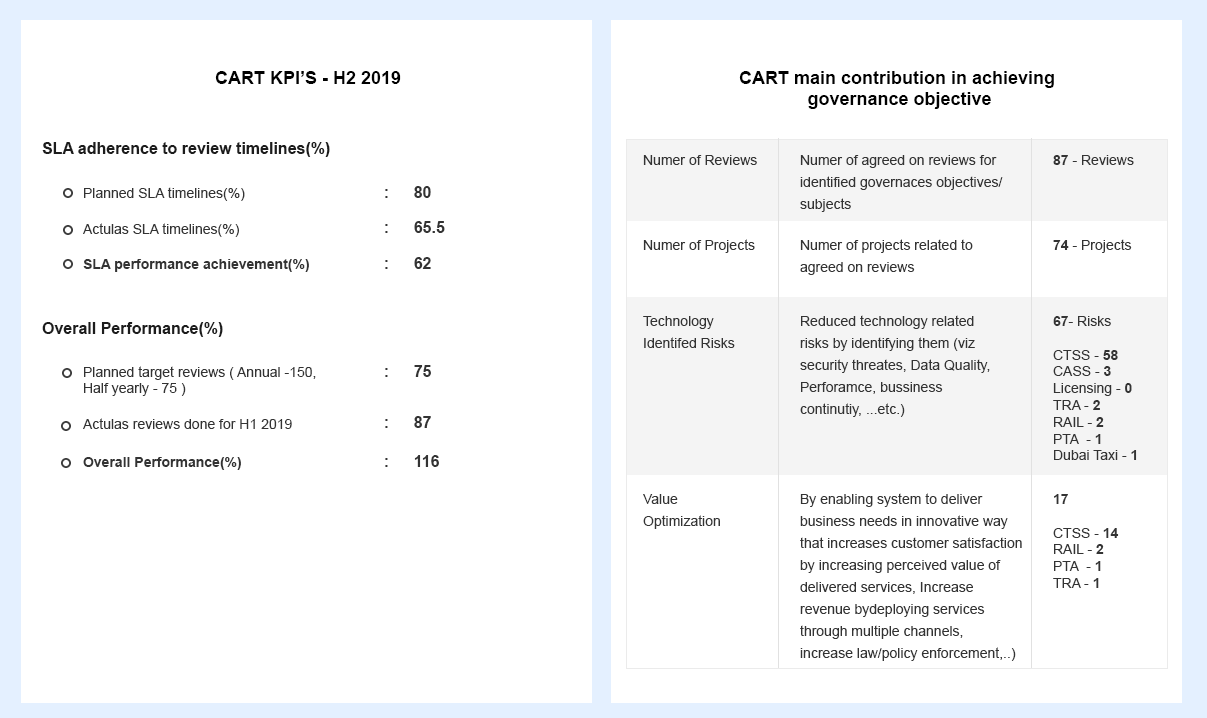
<style>
.page{position:relative;width:1207px;height:718px;background:#ffffff}
.page>*{position:absolute;margin:0}
.t1{font:18px "Arial-BoldMT";color:#010101}
.t2{font:16px "Arial-BoldMT";color:#1c1c1c}
.t3{font:14px "ArialMT";color:#333333}
.t4{font:14px/22px "ArialMT";color:#333333}
.t5{font:14px "Arial-BoldMT";color:#333333}
.t6{font:16px "Arial-BoldMT";color:#333333}
</style>
<div class="page">
<p class="t1" style="left:215px;top:71px;width:186px;height:13px">CART KPI’S - H2 2019</p>
<p class="t1" style="left:739px;top:71px;width:315px;height:38px;text-align:center">CART main contribution in achieving<br> governance objective</p>
<p class="t2" style="left:42px;top:142px;width:288px;height:15px">SLA adherence to review timelines(%)</p>
<p class="t3" style="left:643px;top:155px;width:114px;height:10px">Numer of Reviews</p>
<p class="t4" style="left:800px;top:155px;width:203px;height:57px">Numer of agreed on reviews for<br>identified governaces objectives/<br>subjects</p>
<p class="t3" style="left:1053px;top:155px;width:81px;height:10px"><span class="t5">87</span> - Reviews</p>
<p class="t3" style="left:84px;top:187px;width:161px;height:14px">Planned SLA timelines(%)</p>
<p class="t6" style="left:385px;top:189px;width:3px;height:9px">:</p>
<p class="t6" style="left:414px;top:186px;width:17px;height:12px">80</p>
<p class="t6" style="left:414px;top:221px;width:31px;height:12px">65.5</p>
<p class="t3" style="left:83px;top:223px;width:156px;height:14px">Actulas SLA timelines(%)</p>
<p class="t6" style="left:385px;top:224px;width:3px;height:9px">:</p>
<p class="t3" style="left:643px;top:239px;width:112px;height:14px">Numer of Projects</p>
<p class="t4" style="left:800px;top:239px;width:173px;height:36px">Numer of projects related to <br>agreed on reviews</p>
<p class="t3" style="left:1053px;top:239px;width:79px;height:14px"><span class="t5">74</span> - Projects</p>
<p class="t6" style="left:414px;top:257px;width:17px;height:12px">62</p>
<p class="t5" style="left:83px;top:259px;width:226px;height:13px">SLA performance achievement(%)</p>
<p class="t6" style="left:385px;top:260px;width:3px;height:9px">:</p>
<p class="t4" style="left:643px;top:316px;width:92px;height:32px">Technology<br>Identifed Risks</p>
<p class="t4" style="left:800px;top:315px;width:190px;height:102px">Reduced technology related <br>risks by identifying them (viz<br>security threates, Data Quality,<br>Perforamce, bussiness <br>continutiy, ...etc.)</p>
<p class="t3" style="left:1053px;top:316px;width:84px;height:144px"><span class="t5">67</span>- Risks<br><br>CTSS - <span class="t5">58<br></span>CASS - <span class="t5">3<br></span>Licensing - <span class="t5">0<br></span>TRA - <span class="t5">2<br></span>RAIL - <span class="t5">2<br></span>PTA  - <span class="t5">1<br></span>Dubai Taxi - <span class="t5">1</span></p>
<p class="t2" style="left:42px;top:322px;width:181px;height:15px">Overall Performance(%)</p>
<p class="t3" style="left:84px;top:366px;width:232px;height:30px">Planned target reviews ( Annual -150,<br>Half yearly - 75 )</p>
<p class="t6" style="left:414px;top:365px;width:17px;height:12px">75</p>
<p class="t6" style="left:385px;top:368px;width:3px;height:9px">:</p>
<p class="t3" style="left:83px;top:418px;width:209px;height:11px">Actulas reviews done for H1 2019</p>
<p class="t6" style="left:385px;top:419px;width:3px;height:9px">:</p>
<p class="t6" style="left:414px;top:416px;width:17px;height:12px">87</p>
<p class="t5" style="left:83px;top:457px;width:158px;height:13px">Overall Performance(%)</p>
<p class="t6" style="left:385px;top:458px;width:3px;height:9px">:</p>
<p class="t6" style="left:414px;top:455px;width:25px;height:12px">116</p>
<p class="t4" style="left:643px;top:494px;width:77px;height:35px">Value<br>Optimization</p>
<p class="t4" style="left:800px;top:493px;width:222px;height:168px">By enabling system to deliver <br>business needs in innovative way <br>that increases customer satisfaction<br>by increasing perceived value of <br>delivered services, Increase <br>revenue bydeploying services <br>through multiple channels, <br>increase law/policy enforcement,..)</p>
<p class="t3" style="left:1053px;top:494px;width:66px;height:94px"><span class="t5">17<br></span><br>CTSS - <span class="t5">14<br></span>RAIL - <span class="t5">2<br></span>PTA  - <span class="t5">1<br></span>TRA - <span class="t5">1</span></p>
</div>
